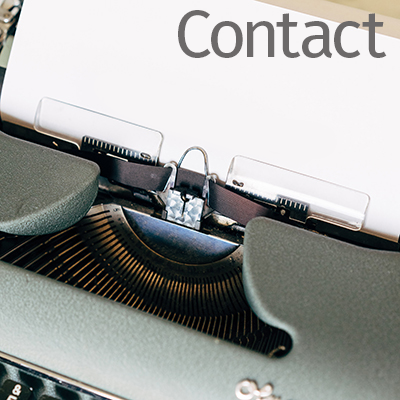
<style>
.page{position:relative;width:400px;height:400px}
.page>*{position:absolute;margin:0}
.t1{font:67.3px "FiraSans-Regular";letter-spacing:-0.04em;color:#6c6969}
</style>
<div class="page">
<p class="t1" style="left:178px;top:10px;width:209px;height:48px">Contact</p>
</div>
